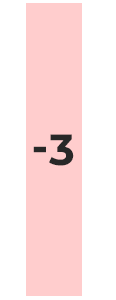
<style>
.page{position:relative;width:116px;height:300px;background:#ffffff}
.page>*{position:absolute;margin:0}
.t1{font:43.5px "Montserrat-Bold";letter-spacing:0.025em;color:#282828;text-transform:uppercase}
</style>
<div class="page">
<p class="t1" style="left:33px;top:134px;width:41px;height:32px">-3</p>
</div>
